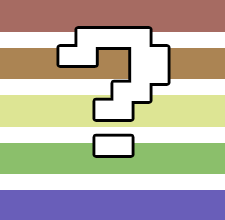
<style>
.page{position:relative;width:225px;height:220px;background:#ffffff}
.page>*{position:absolute;margin:0}
.t1{font:184px "Commodore64";letter-spacing:0.075em;color:#ffffff}
</style>
<div class="page">
<p class="t1" style="left:59px;top:29px;width:109px;height:126px">?</p>
</div>
